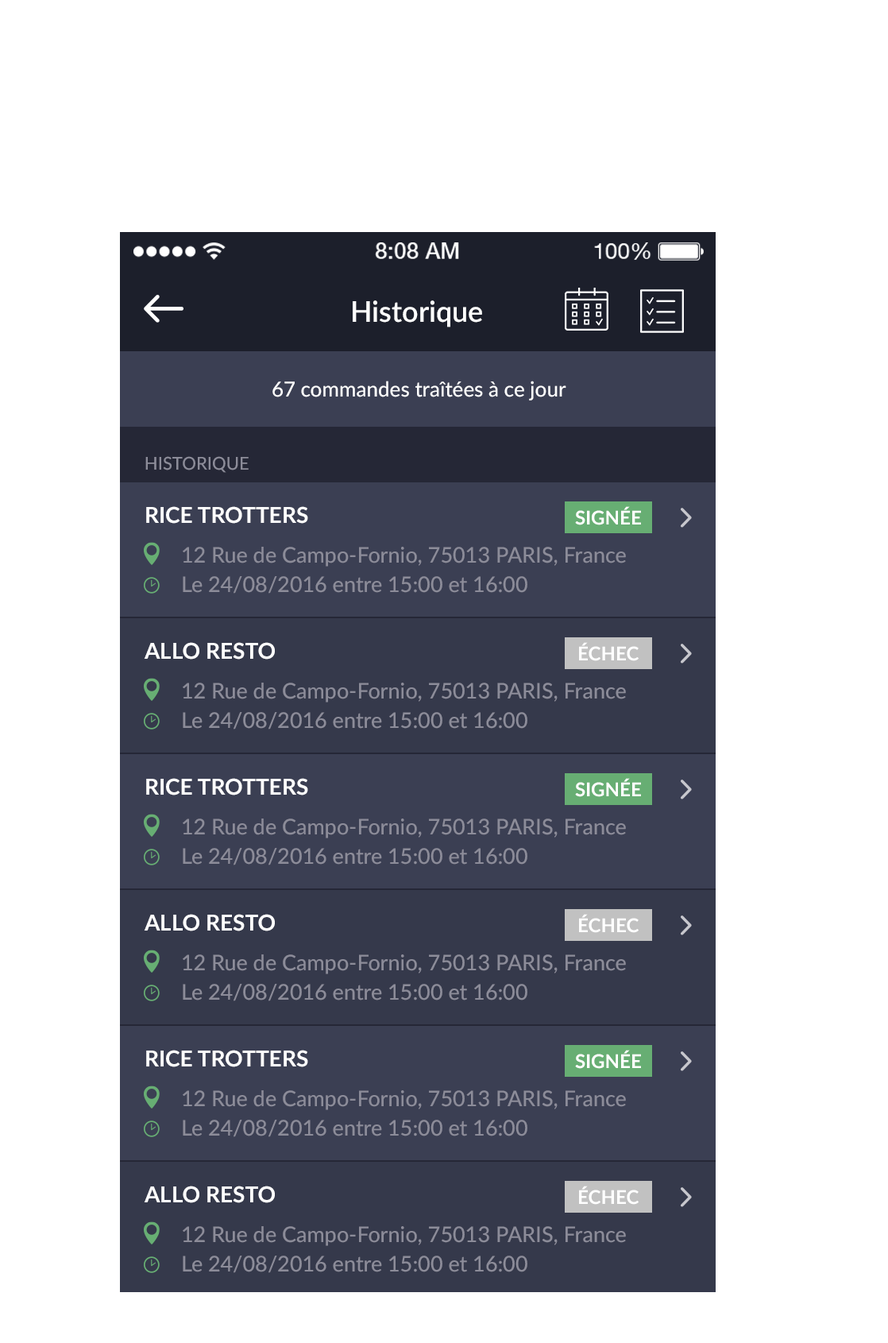
<style>
.page{position:relative;width:888px;height:1343px;background:#ffffff}
.page>*{position:absolute;margin:0}
.t1{font:28.6px "Lato-Semibold";color:#ffffff}
.t2{font:20.7px "Lato-Medium";color:#ffffff}
.t3{font:20.7px "Lato-Medium";color:#ffffff;text-transform:uppercase}
.t4{font:17.5px "Lato-Medium";color:#8c8c99;text-transform:uppercase}
.t5{font:22.2px "Lato-Bold";color:#ffffff;text-transform:uppercase}
.t6{font:19.1px "Lato-Bold";color:#ffffff}
.t7{font:21.4px "Lato-Medium";color:#8c8c99}
.t8{font:19.1px "Lato-Bold";color:#ffffff;text-transform:uppercase}
</style>
<div class="page">
<p class="t1" style="left:353px;top:300px;width:129px;height:27px">Historique</p>
<p class="t2" style="left:272px;top:381px;width:294px;height:19px"><span class="t3">67 </span>commandes traîtées à ce jour</p>
<p class="t4" style="left:145px;top:456px;width:104px;height:17px">historique</p>
<p class="t5" style="left:146px;top:506px;width:162px;height:18px">Rice Trotters</p>
<p class="t6" style="left:575px;top:506px;width:66px;height:19px">SIGNÉE</p>
<p class="t7" style="left:183px;top:547px;width:443px;height:19px">12 Rue de Campo-Fornio, 75013 PARIS, France</p>
<p class="t7" style="left:183px;top:576px;width:344px;height:17px">Le 24/08/2016 entre 15:00 et 16:00</p>
<p class="t5" style="left:144px;top:642px;width:131px;height:17px">allo resto</p>
<p class="t8" style="left:579px;top:642px;width:60px;height:19px">échec</p>
<p class="t7" style="left:183px;top:682px;width:443px;height:20px">12 Rue de Campo-Fornio, 75013 PARIS, France</p>
<p class="t7" style="left:183px;top:712px;width:344px;height:17px">Le 24/08/2016 entre 15:00 et 16:00</p>
<p class="t5" style="left:146px;top:778px;width:162px;height:17px">Rice Trotters</p>
<p class="t6" style="left:575px;top:778px;width:66px;height:19px">SIGNÉE</p>
<p class="t7" style="left:183px;top:818px;width:443px;height:20px">12 Rue de Campo-Fornio, 75013 PARIS, France</p>
<p class="t7" style="left:183px;top:848px;width:344px;height:17px">Le 24/08/2016 entre 15:00 et 16:00</p>
<p class="t5" style="left:144px;top:914px;width:131px;height:17px">allo resto</p>
<p class="t8" style="left:579px;top:914px;width:60px;height:19px">échec</p>
<p class="t7" style="left:183px;top:954px;width:443px;height:20px">12 Rue de Campo-Fornio, 75013 PARIS, France</p>
<p class="t7" style="left:183px;top:983px;width:344px;height:18px">Le 24/08/2016 entre 15:00 et 16:00</p>
<p class="t5" style="left:146px;top:1049px;width:162px;height:18px">Rice Trotters</p>
<p class="t6" style="left:575px;top:1049px;width:66px;height:20px">SIGNÉE</p>
<p class="t7" style="left:183px;top:1090px;width:443px;height:20px">12 Rue de Campo-Fornio, 75013 PARIS, France</p>
<p class="t7" style="left:183px;top:1119px;width:344px;height:18px">Le 24/08/2016 entre 15:00 et 16:00</p>
<p class="t5" style="left:144px;top:1185px;width:131px;height:18px">allo resto</p>
<p class="t8" style="left:579px;top:1185px;width:60px;height:19px">échec</p>
<p class="t7" style="left:183px;top:1226px;width:443px;height:20px">12 Rue de Campo-Fornio, 75013 PARIS, France</p>
<p class="t7" style="left:183px;top:1255px;width:344px;height:18px">Le 24/08/2016 entre 15:00 et 16:00</p>
</div>
